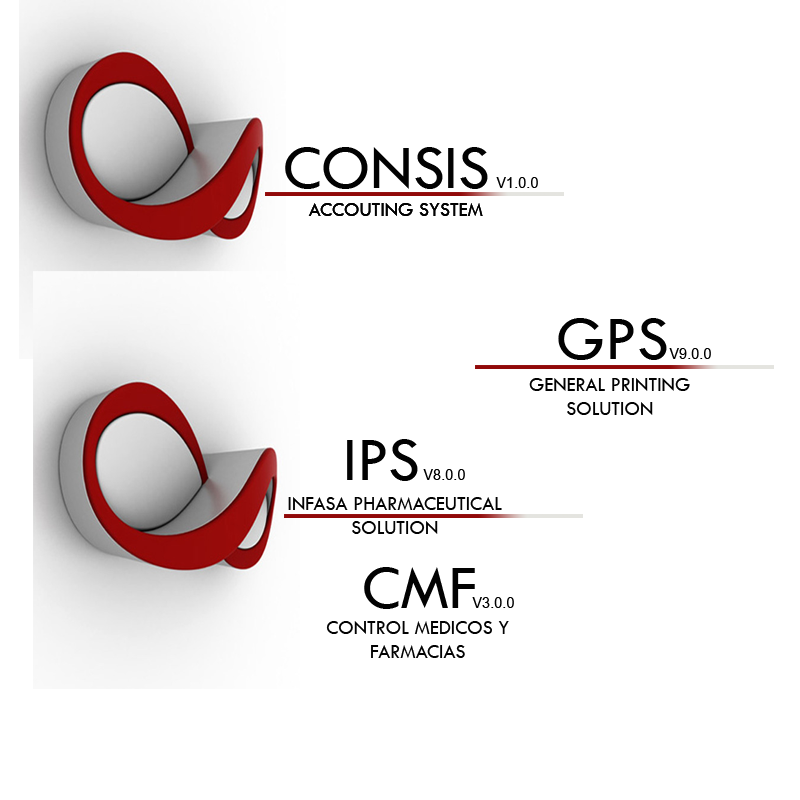
<style>
.page{position:relative;width:800px;height:800px;background:#ffffff}
.page>*{position:absolute;margin:0}
.t1{font:63.6px "TwCenMT-Regular";color:#020202}
.t2{font:20.3px "Utsaah";color:#020202}
.t3{font:20px "TwCenMT-Regular";color:#020202}
</style>
<div class="page">
<p class="t1" style="left:285px;top:147px;width:203px;height:42px">CONSIS</p>
<p class="t2" style="left:496px;top:177px;width:42px;height:11px">V1.0.0</p>
<p class="t3" style="left:308px;top:203px;width:175px;height:13px">ACCOUTING SYSTEM</p>
<p class="t3" style="left:308px;top:203px;width:175px;height:13px">ACCOUTING SYSTEM</p>
<p class="t1" style="left:558px;top:318px;width:109px;height:42px">GPS</p>
<p class="t2" style="left:669px;top:348px;width:42px;height:11px">V9.0.0</p>
<p class="t3" style="left:529px;top:378px;width:161px;height:37px;text-align:center">GENERAL PRINTING<br>SOLUTION</p>
<p class="t1" style="left:347px;top:439px;width:71px;height:42px">IPS</p>
<p class="t2" style="left:423px;top:469px;width:42px;height:11px">V8.0.0</p>
<p class="t3" style="left:288px;top:497px;width:214px;height:37px;text-align:center">INFASA PHARMACEUTICAL<br>SOLUTION</p>
<p class="t1" style="left:364px;top:567px;width:111px;height:42px">CMF</p>
<p class="t2" style="left:472px;top:597px;width:42px;height:11px">V3.0.0</p>
<p class="t3" style="left:326px;top:621px;width:183px;height:37px;text-align:center">CONTROL MEDICOS Y<br>FARMACIAS</p>
</div>
